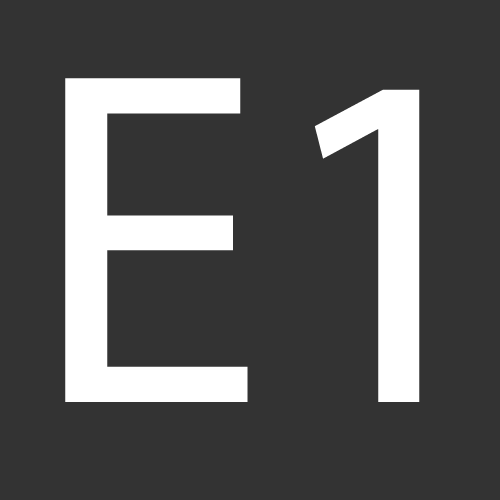
<style>
.page{position:relative;width:500px;height:500px;background:#333333}
.page>*{position:absolute;margin:0}
.t1{font:480.2px "MyriadPro-Regular";color:#ffffff}
</style>
<div class="page">
<p class="t1" style="left:65px;top:78px;width:355px;height:324px">E1</p>
</div>
